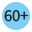
<style>
.page{position:relative;width:32px;height:32px;background:#7ecef4}
.page>*{position:absolute;margin:0}
.t1{font:16.7px "SourceSans3Roman-Regular";color:#282728}
</style>
<div class="page">
<p class="t1" style="left:4px;top:10px;width:24px;height:12px">60+</p>
</div>
